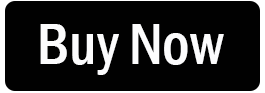
<style>
.page{position:relative;width:265px;height:93px;background:#010101}
.page>*{position:absolute;margin:0}
.t1{font:60px "FranklinGothic-MediumCond";letter-spacing:-0.005em;color:#fcfcfd}
</style>
<div class="page">
<p class="t1" style="left:40px;top:24px;width:184px;height:51px">Buy Now</p>
</div>
